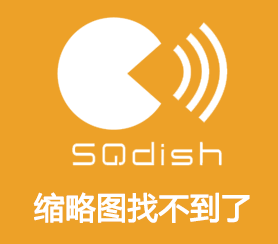
<style>
.page{position:relative;width:278px;height:244px;background:#eda128}
.page>*{position:absolute;margin:0}
.t1{font:30.4px "MicrosoftYaHei";color:#ffffff;font-weight:bold}
</style>
<div class="page">
<p class="t1" style="left:33px;top:192px;width:217px;height:31px">缩略图找不到了</p>
</div>
